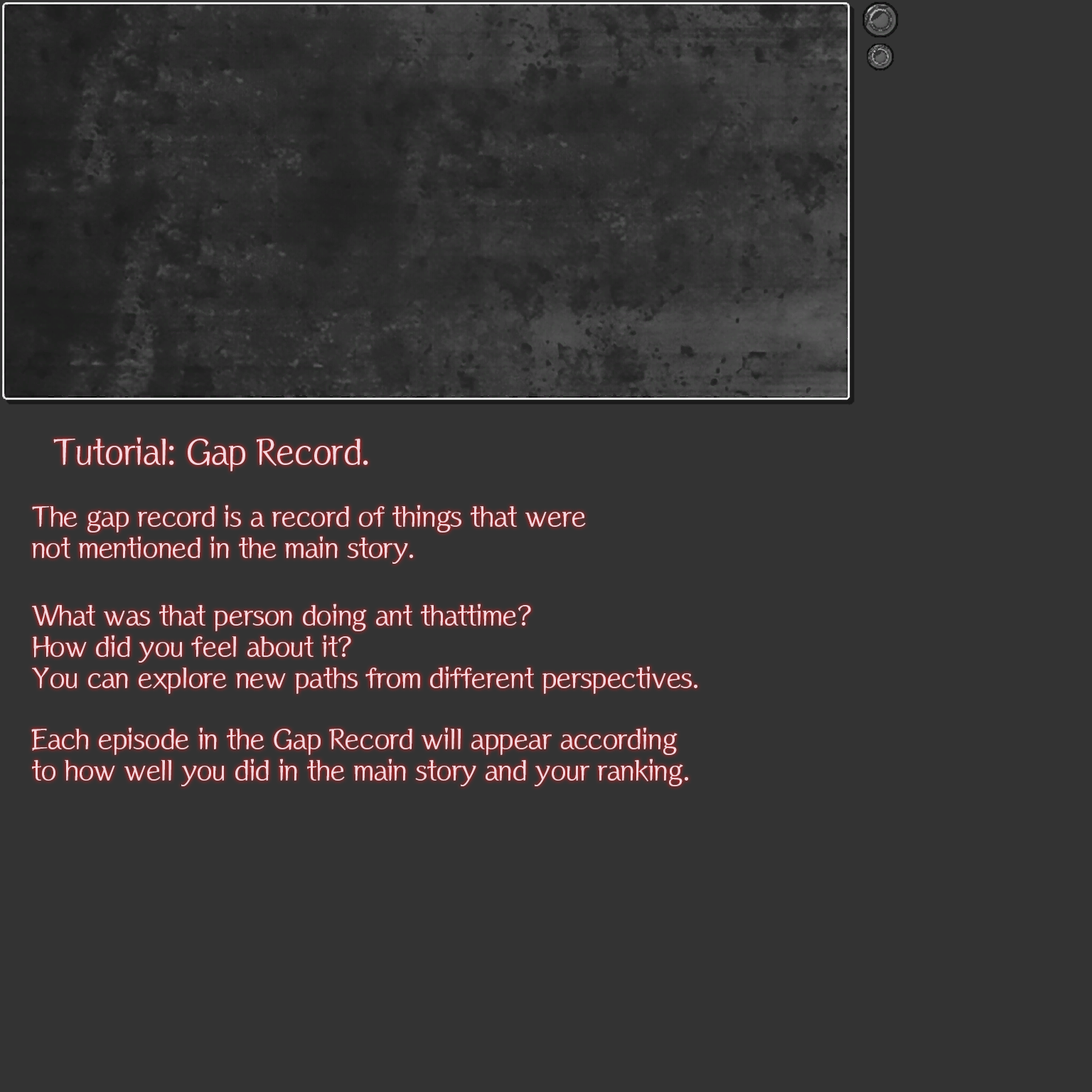
<style>
.page{position:relative;width:1092px;height:1092px;background:#333333}
.page>*{position:absolute;margin:0}
.t1{font:35.5px "MoariaStd-Regular";letter-spacing:-0.04em;color:#f7d7de}
.t2{font:28.4px/24.9px "MoariaStd-Regular";letter-spacing:-0.04em;color:#f7d7de}
</style>
<div class="page">
<p class="t1" style="left:53px;top:437px;width:315px;height:34px">Tutorial: Gap Record.</p>
<p class="t2" style="left:32px;top:505px;width:554px;height:59px">The gap record is a record of things that were<br>not mentioned in the main story.</p>
<p class="t2" style="left:32px;top:604px;width:665px;height:90px">What was that person doing ant thattime?<br>How did you feel about it?<br>You can explore new paths from different perspectives.</p>
<p class="t2" style="left:31px;top:727px;width:657px;height:59px">Each episode in the Gap Record will appear according<br>to how well you did in the main story and your ranking.</p>
</div>
